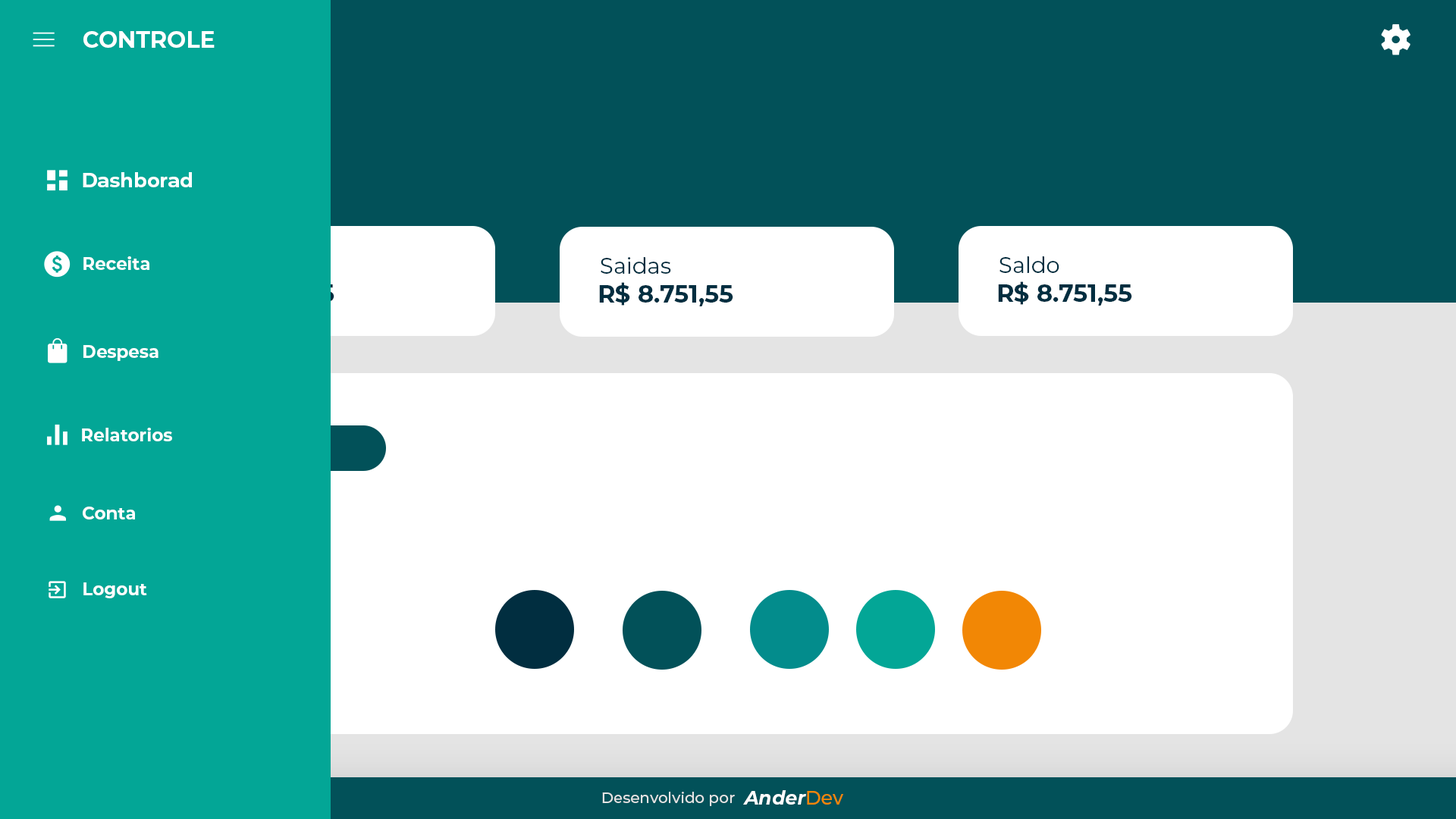
<style>
.page{position:relative;width:1456px;height:819px;background:#ffffff}
.page>*{position:absolute;margin:0}
.t1{font:22.7px "Montserrat-Bold";color:#ffffff}
.t2{font:19.5px "Montserrat-Bold";color:#ffffff}
.t3{font:17.4px "Montserrat-Bold";color:#ffffff}
.t4{font:22px "Montserrat-Regular";color:#012e40}
.t5{font:24.3px "Montserrat-Bold";color:#012e40}
.t6{font:15.2px "Montserrat-Medium";color:#e4e4e4}
.t7{font:19px "Montserrat-BoldItalic";color:#ffffff}
.t8{font:19px "Montserrat-Medium";color:#f28705}
</style>
<div class="page">
<p class="t1" style="left:83px;top:30px;width:132px;height:17px">CONTROLE</p>
<p class="t1" style="left:83px;top:31px;width:132px;height:17px">CONTROLE</p>
<p class="t2" style="left:83px;top:172px;width:109px;height:15px">Dashborad</p>
<p class="t3" style="left:83px;top:256px;width:66px;height:14px">Receita</p>
<p class="t4" style="left:601px;top:257px;width:70px;height:17px">Saidas</p>
<p class="t4" style="left:999px;top:256px;width:60px;height:17px">Saldo</p>
<p class="t5" style="left:998px;top:281px;width:134px;height:25px">R$ 8.751,55</p>
<p class="t5" style="left:599px;top:282px;width:134px;height:24px">R$ 8.751,55</p>
<p class="t3" style="left:83px;top:345px;width:75px;height:16px">Despesa</p>
<p class="t3" style="left:82px;top:428px;width:90px;height:13px">Relatorios</p>
<p class="t3" style="left:83px;top:507px;width:52px;height:12px">Conta</p>
<p class="t3" style="left:83px;top:582px;width:64px;height:16px">Logout</p>
<p class="t6" style="left:602px;top:792px;width:133px;height:14px">Desenvolvido por</p>
<p class="t7" style="left:743px;top:790px;width:100px;height:15px">Ander<span class="t8">Dev</span></p>
</div>
